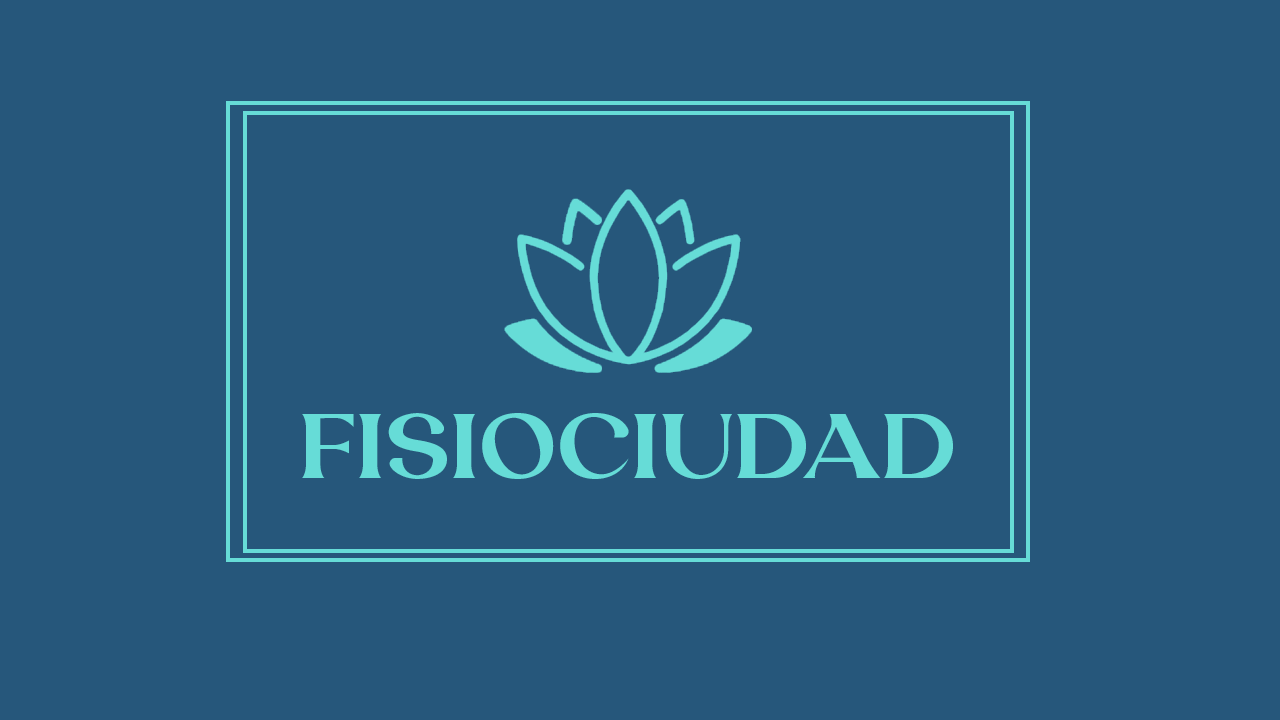
<style>
.page{position:relative;width:1280px;height:720px;background:#26577b}
.page>*{position:absolute;margin:0}
.t1{font:91.7px "LaviossaMedium";color:#66dcd7}
</style>
<div class="page">
<p class="t1" style="left:302px;top:413px;width:651px;height:66px">FISIOCIUDAD</p>
</div>
